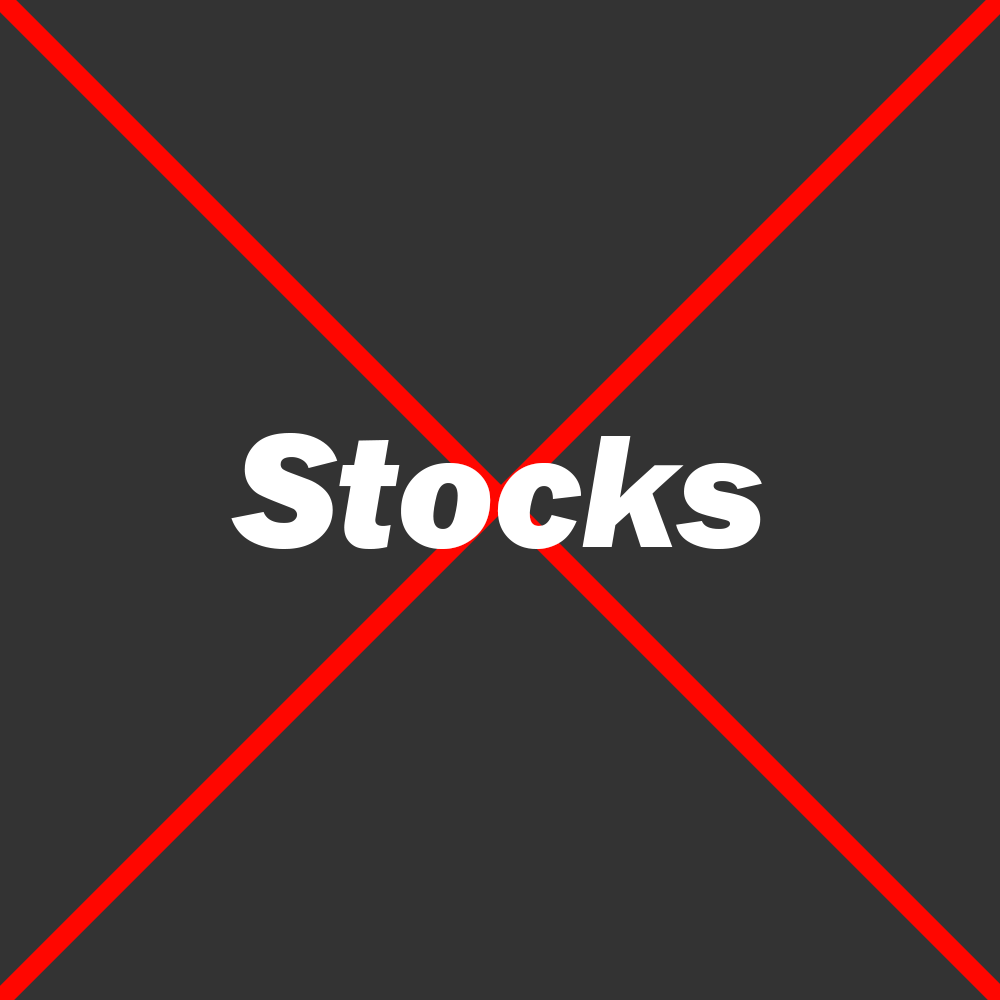
<style>
.page{position:relative;width:1000px;height:1000px;background:#333333}
.page>*{position:absolute;margin:0}
.t1{font:166.7px "FranklinGothic-HeavyItalic";color:#ffffff}
</style>
<div class="page">
<p class="t1" style="left:231px;top:433px;width:531px;height:116px;rotate:135deg">Stocks</p>
</div>
